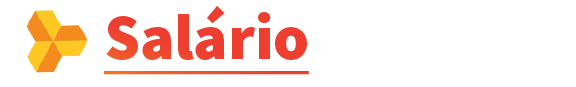
<style>
.page{position:relative;width:576px;height:87px;background:#ffffff}
.page>*{position:absolute;margin:0}
.t1{font:64px "SourceSansPro-Black";color:#ee3e30;text-decoration:underline}
</style>
<div class="page">
<p class="t1" style="left:104px;top:5px;width:205px;height:70px">Salário</p>
</div>
